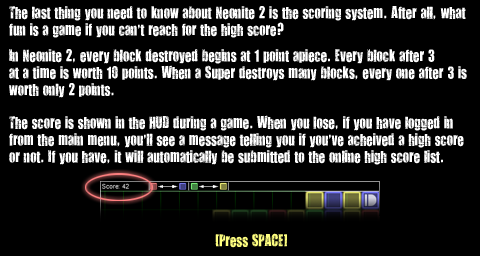
<style>
.page{position:relative;width:480px;height:256px;background:#000000}
.page>*{position:absolute;margin:0}
.t1{font:14px "YouAreLoved";color:#ffffff}
.t2{font:14px "YouAreLoved";color:#ffff80}
</style>
<div class="page">
<p class="t1" style="left:9px;top:6px;width:458px;height:242px">The last thing you need to know about Neonite 2 is the scoring system. After all, what<br>fun is a game if you can’t reach for the high score?<br><br>In Neonite 2, every block destroyed begins at 1 point apiece. Every block after 3<br>at a time is worth 10 points. When a Super destroys many blocks, every one after 3 is<br>worth only 2 points.<br><br>The score is shown in the HUD during a game. When you lose, if you have logged in<br>from the main menu, you’ll see a message telling you if you’ve acheived a high score<br>or not. If you have, it will automatically be submitted to the online high score list.<br><br><br><br><br>                                                     <span class="t2">[Press SPACE]</span></p>
</div>
